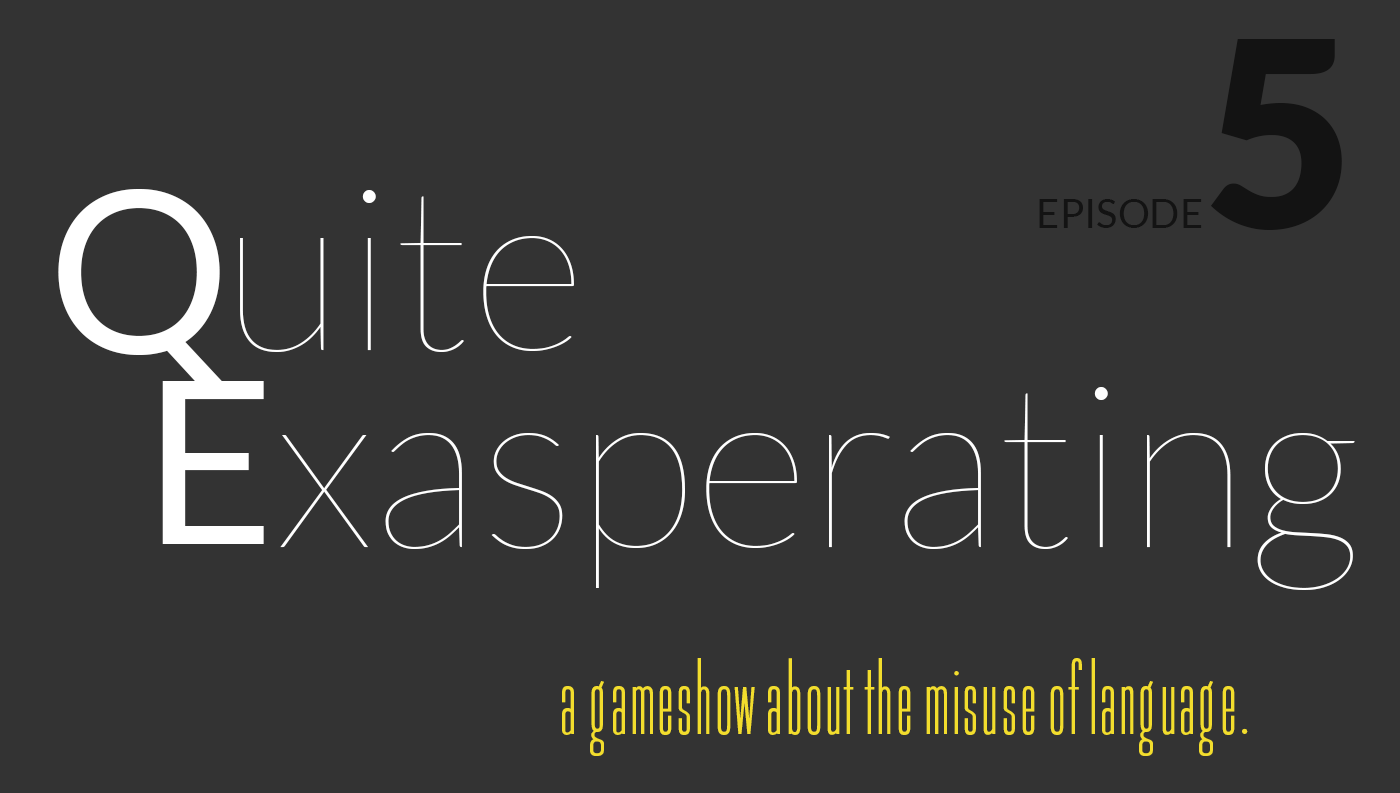
<style>
.page{position:relative;width:1400px;height:793px;background:#333333}
.page>*{position:absolute;margin:0}
.t1{font:260px "Lato-Black";color:#131313}
.t2{font:227.9px "Lato-Regular";color:#ffffff}
.t3{font:227.9px "Lato-Hairline";color:#ffffff}
.t4{font:40px "Lato-Regular";color:#131313}
.t5{font:100px "OPTIGalaxy";color:#f2dd2d}
</style>
<div class="page">
<p class="t1" style="left:1210px;top:39px;width:132px;height:191px">5</p>
<p class="t2" style="left:58px;top:189px;width:170px;height:198px">Q</p>
<p class="t3" style="left:240px;top:190px;width:334px;height:162px">uite</p>
<p class="t4" style="left:1039px;top:199px;width:163px;height:29px">EPISODE</p>
<p class="t2" style="left:162px;top:381px;width:102px;height:163px">E</p>
<p class="t3" style="left:280px;top:387px;width:1075px;height:203px">xasperating</p>
<p class="t5" style="left:562px;top:658px;width:686px;height:98px">a gameshow about the misuse of language.</p>
</div>
